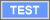
<style>
.page{position:relative;width:50px;height:20px;background:#6699ff}
.page>*{position:absolute;margin:0}
.t1{font:11.7px "Arial-BoldMT";color:#ffffff}
</style>
<div class="page">
<p class="t1" style="left:10px;top:5px;width:30px;height:10px">TEST</p>
</div>
